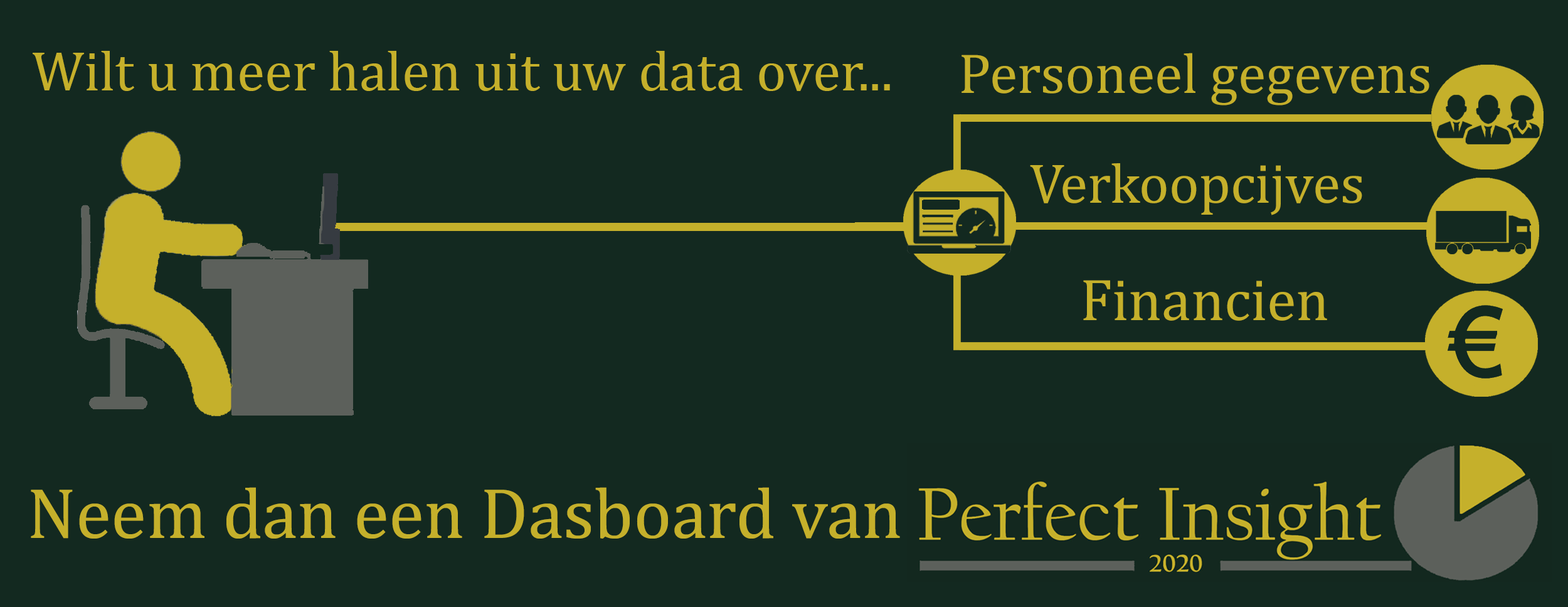
<style>
.page{position:relative;width:1568px;height:607px;background:#132920}
.page>*{position:absolute;margin:0}
.t1{font:56.4px "CambriaMath";color:#c5b02b}
.t2{font:56.7px "CambriaMath";color:#c5b02b}
.t3{font:59.6px "CambriaMath";color:#c5b02b}
.t4{font:72.1px "CambriaMath";color:#c5b02b}
</style>
<div class="page">
<p class="t1" style="left:33px;top:51px;width:857px;height:40px">Wilt u meer halen uit uw data over...</p>
<p class="t2" style="left:961px;top:53px;width:468px;height:52px">Personeel gegevens</p>
<p class="t1" style="left:1030px;top:163px;width:332px;height:52px">Verkoopcijves</p>
<p class="t3" style="left:1083px;top:280px;width:244px;height:40px">Financien</p>
<p class="t4" style="left:31px;top:487px;width:869px;height:51px">Neem dan een Dasboard van</p>
</div>
